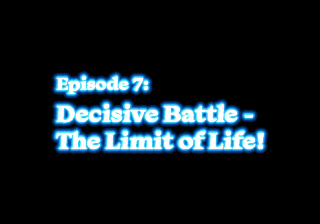
<style>
.page{position:relative;width:320px;height:224px;background:#000000}
.page>*{position:absolute;margin:0}
.t1{font:24px/27px "Monarcha-Bold";color:#ffffff}
.t2{font:18px/30px "Monarcha-Bold";color:#ffffff}
.t3{font:24px/32px "Monarcha-Bold";color:#ffffff}
</style>
<div class="page">
<p class="t1" style="left:56px;top:76px;width:208px;height:73px"><span class="t2">Episode 7:<br></span><span class="t3">Decisive Battle - <br></span>The Limit of Life!</p>
<p class="t1" style="left:56px;top:76px;width:208px;height:73px"><span class="t2">Episode 7:<br></span><span class="t3">Decisive Battle - <br></span>The Limit of Life!</p>
</div>
